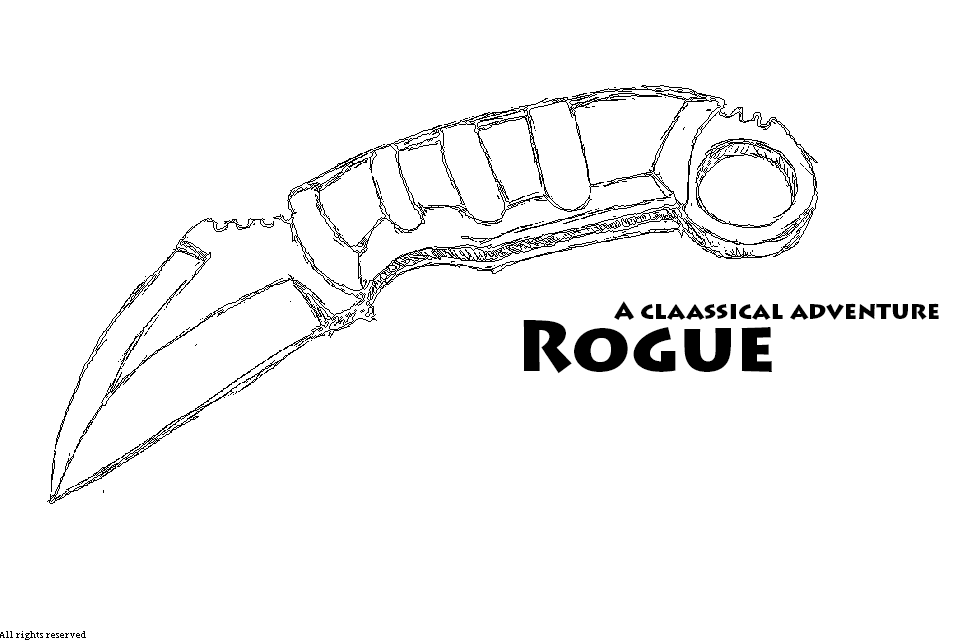
<style>
.page{position:relative;width:960px;height:640px;background:#ffffff}
.page>*{position:absolute;margin:0}
.t1{font:24px "LithosPro-Black";color:#000000}
.t2{font:72px "LithosPro-Black";color:#000000}
</style>
<div class="page">
<p class="t1" style="left:614px;top:301px;width:325px;height:19px">A claassical adventure</p>
<p class="t2" style="left:523px;top:320px;width:249px;height:54px">Rogue</p>
</div>
